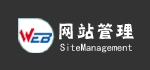
<style>
.page{position:relative;width:150px;height:70px;background:#333333}
.page>*{position:absolute;margin:0}
.t1{font:26px "HYh2gj";color:#ffffff;scale:0.75 1}
.t2{font:10.4px "SimHei";color:#ffffff}
</style>
<div class="page">
<p class="t1" style="left:59px;top:23px;width:75px;height:17px">网站管理</p>
<p class="t2" style="left:60px;top:43px;width:72px;height:10px">SiteManagement</p>
</div>
